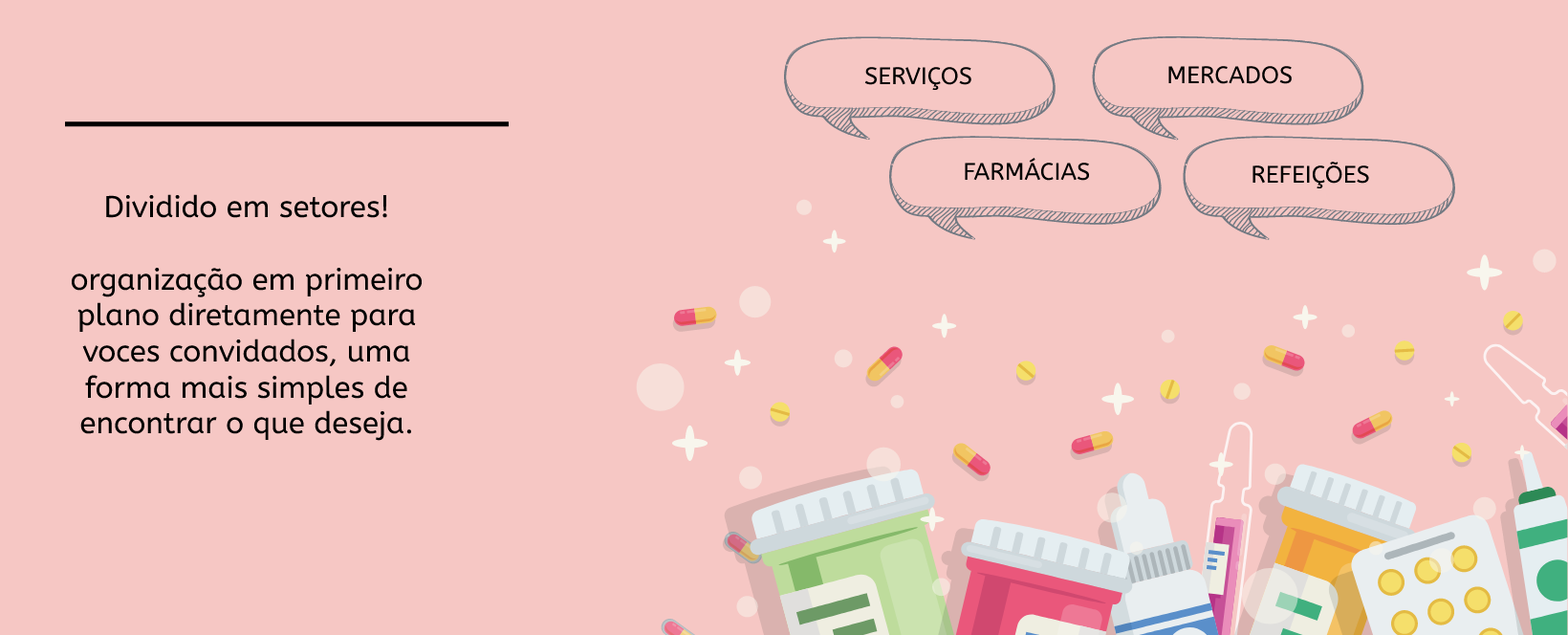
<style>
.page{position:relative;width:1568px;height:635px;background:#f6c7c4}
.page>*{position:absolute;margin:0}
.t1{font:23.9px "ABeeZee-Regular";color:#000000}
.t2{font:30px "ABeeZee-Regular";color:#000000}
</style>
<div class="page">
<p class="t1" style="left:1168px;top:66px;width:124px;height:18px">MERCADOS</p>
<p class="t1" style="left:864px;top:67px;width:107px;height:24px">SERVIÇOS</p>
<p class="t1" style="left:965px;top:158px;width:125px;height:23px">FARMÁCIAS</p>
<p class="t1" style="left:1252px;top:162px;width:117px;height:27px">REFEIÇÕES</p>
<p class="t2" style="left:71px;top:194px;width:352px;height:247px;text-align:center">Dividido em setores!<br><br>organização em primeiro plano diretamente para voces convidados, uma forma mais simples de encontrar o que deseja.</p>
</div>
